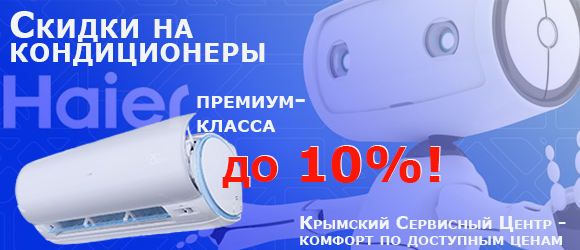
<style>
.page{position:relative;width:580px;height:250px}
.page>*{position:absolute;margin:0}
.t1{font:36px "Verdana-Bold";color:#f2f5f7;font-variant:small-caps}
.t2{font:24px "Verdana-Bold";color:#f2f5f7;font-variant:small-caps}
.t3{font:48px "Verdana-Bold";color:#fc1706;font-variant:small-caps}
.t4{font:18px/16px "Verdana-Bold";color:#f2f5f7;font-variant:small-caps}
</style>
<div class="page">
<p class="t1" style="left:10px;top:11px;width:255px;height:55px">Скидки на кондиционеры</p>
<p class="t2" style="left:197px;top:96px;width:108px;height:36px">премиум-класса</p>
<p class="t3" style="left:222px;top:146px;width:218px;height:42px">до 10%!</p>
<p class="t3" style="left:223px;top:145px;width:218px;height:42px">до 10%!</p>
<p class="t4" style="left:300px;top:216px;width:266px;height:31px">Крымский Сервисный Центр - комфорт по доступным ценам</p>
</div>
